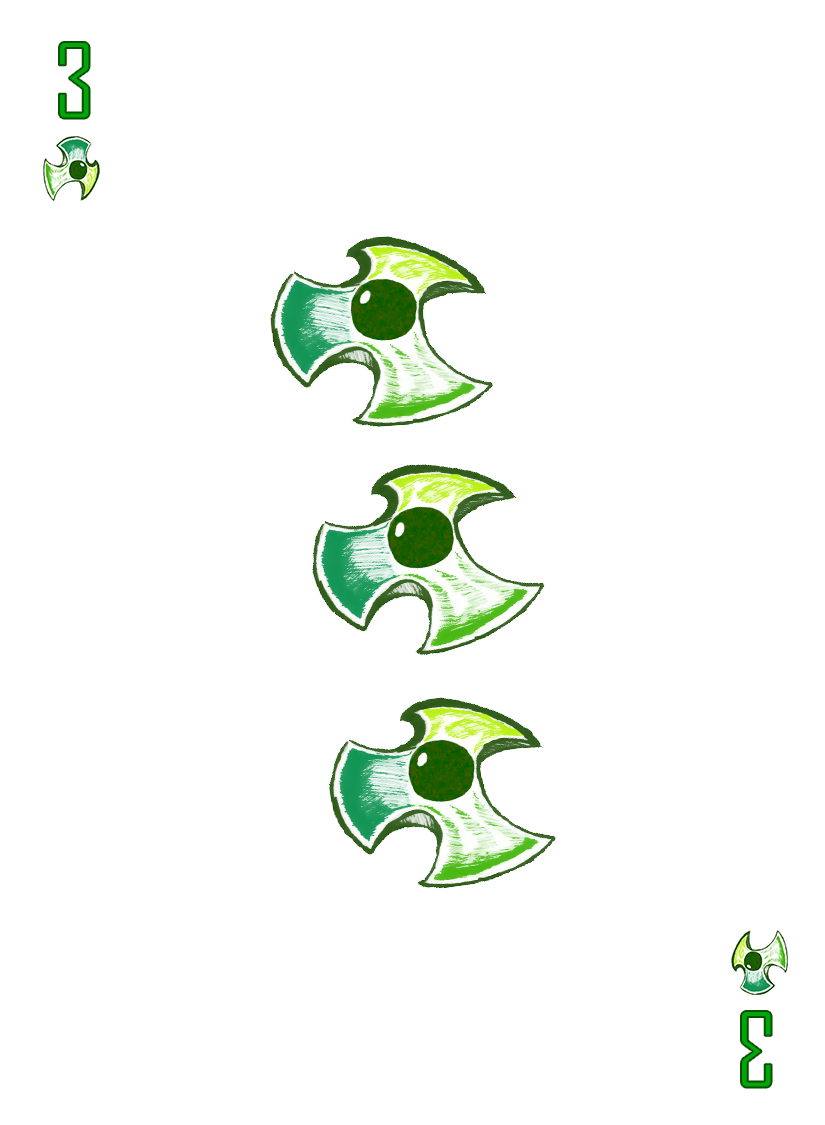
<style>
.page{position:relative;width:825px;height:1125px;background:#ffffff}
.page>*{position:absolute;margin:0}
.t1{font:100px "AgencyFB-Reg";color:#00a60a}
</style>
<div class="page">
<p class="t1" style="left:59px;top:42px;width:31px;height:77px">3</p>
<p class="t1" style="left:741px;top:1011px;width:31px;height:77px;rotate:180deg">3</p>
</div>
